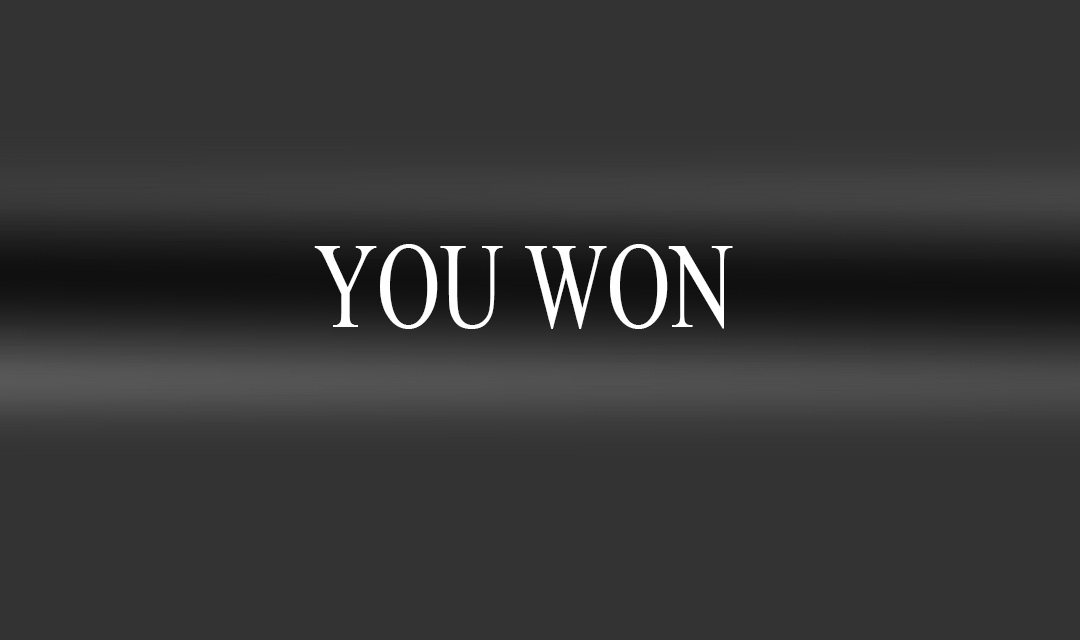
<style>
.page{position:relative;width:1080px;height:640px;background:#333333}
.page>*{position:absolute;margin:0}
.t1{font:122.4px "TimesNewRomanPSMT";color:#ffffff;scale:0.71 1}
</style>
<div class="page">
<p class="t1" style="left:314px;top:244px;width:419px;height:85px">YOU WON</p>
</div>
